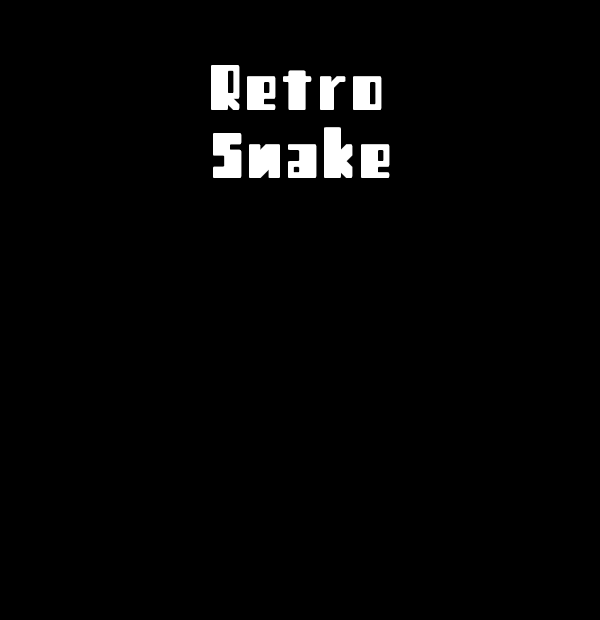
<style>
.page{position:relative;width:600px;height:620px;background:#000000}
.page>*{position:absolute;margin:0}
.t1{font:90px "Retro";color:#ffffff}
</style>
<div class="page">
<p class="t1" style="left:211px;top:65px;width:171px;height:45px">Retro</p>
<p class="t1" style="left:213px;top:127px;width:177px;height:51px">Snake</p>
</div>
